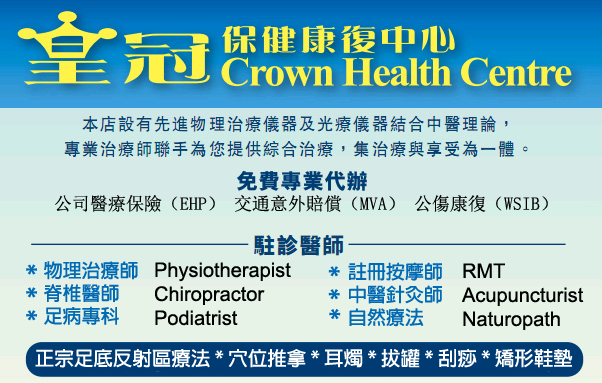
<style>
.page{position:relative;width:602px;height:383px}
.page>*{position:absolute;margin:0}
.t1{font:18px "NSimSun";color:#000302}
.t2{font:19px "AdobeFanHeitiStd-Bold";color:#026ab3}
.t3{font:20px "ArialMT";color:#000101}
.t4{font:19.5px "AdobeFanHeitiStd-Bold";color:#ffffff}
</style>
<div class="page">
<p class="t1" style="left:55px;top:195px;width:493px;height:17px">公司醫療保險（EHP） 交通意外賠償（MVA） 公傷康復（WSIB）</p>
<p class="t2" style="left:44px;top:261px;width:94px;height:64px">物理治療師<br>脊椎醫師<br>足病專科</p>
<p class="t3" style="left:155px;top:262px;width:136px;height:64px">Physiotherapist<br>Chiropractor<br>Podiatrist</p>
<p class="t2" style="left:348px;top:262px;width:94px;height:65px">註冊按摩師<br>中醫針灸師<br>自然療法</p>
<p class="t3" style="left:462px;top:263px;width:122px;height:67px">RMT<br>Acupuncturist<br>Naturopath</p>
<p class="t4" style="left:35px;top:348px;width:538px;height:20px">正宗足底反射區療法 * 穴位推拿 * 耳燭 * 拔罐 * 刮痧 * 矯形鞋墊</p>
</div>
